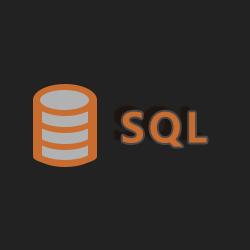
<style>
.page{position:relative;width:250px;height:250px;background:#222222}
.page>*{position:absolute;margin:0}
.t1{font:42px "MalgunGothicBold";letter-spacing:0.1em;color:#db7432;font-variant:small-caps}
</style>
<div class="page">
<p class="t1" style="left:122px;top:111px;width:85px;height:36px">SQL</p>
</div>
